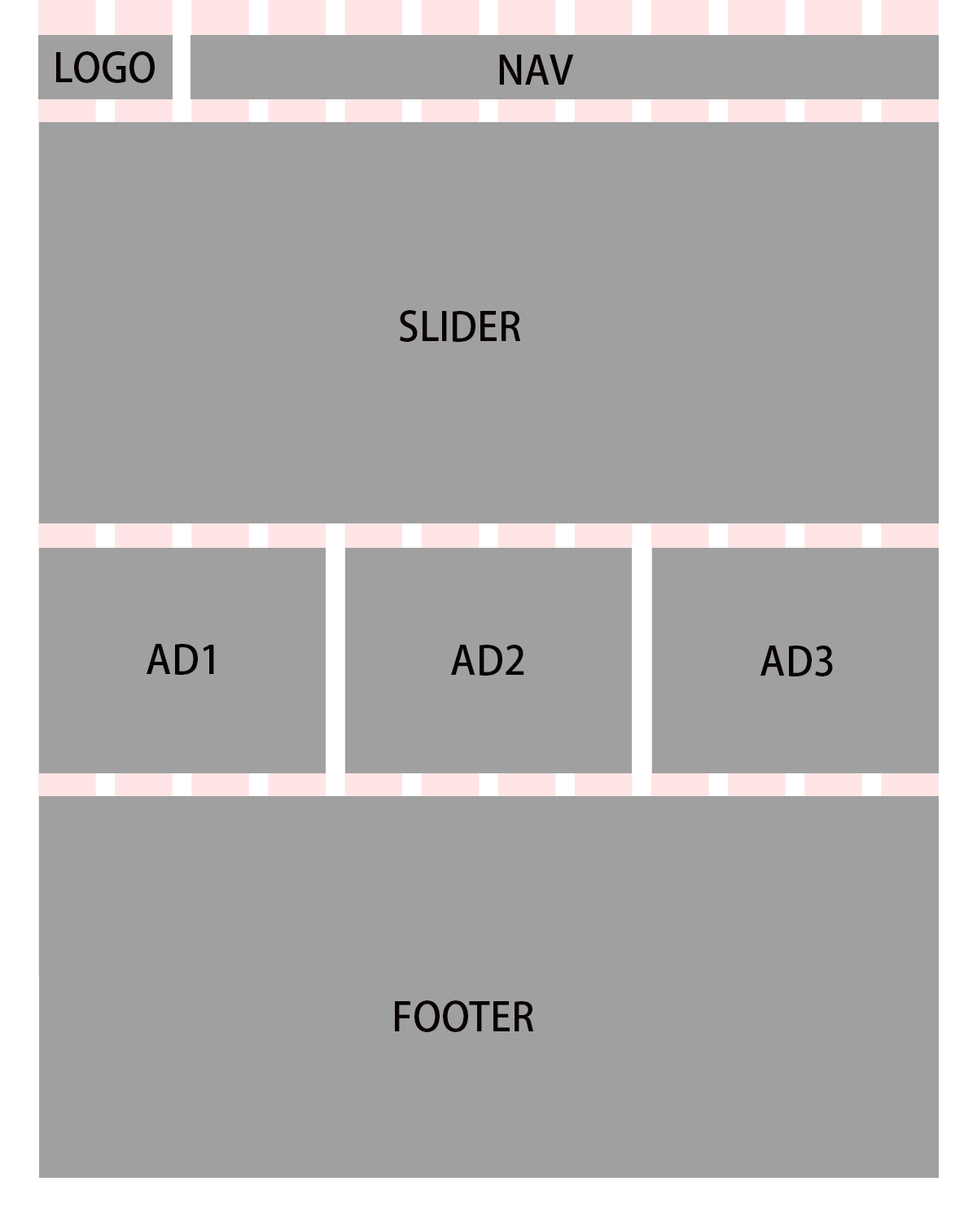
<style>
.page{position:relative;width:977px;height:1221px;background:#a0a0a0}
.page>*{position:absolute;margin:0}
.t1{font:39.1px "AdobeFanHeitiStd-Bold";color:#090101}
</style>
<div class="page">
<p class="t1" style="left:56px;top:51px;width:99px;height:32px">LOGO</p>
<p class="t1" style="left:499px;top:55px;width:75px;height:30px">NAV</p>
<p class="t1" style="left:400px;top:310px;width:121px;height:32px">SLIDER</p>
<p class="t1" style="left:147px;top:644px;width:67px;height:31px">AD1</p>
<p class="t1" style="left:451px;top:645px;width:73px;height:31px">AD2</p>
<p class="t1" style="left:760px;top:645px;width:73px;height:31px">AD3</p>
<p class="t1" style="left:395px;top:1000px;width:139px;height:32px">FOOTER</p>
</div>
